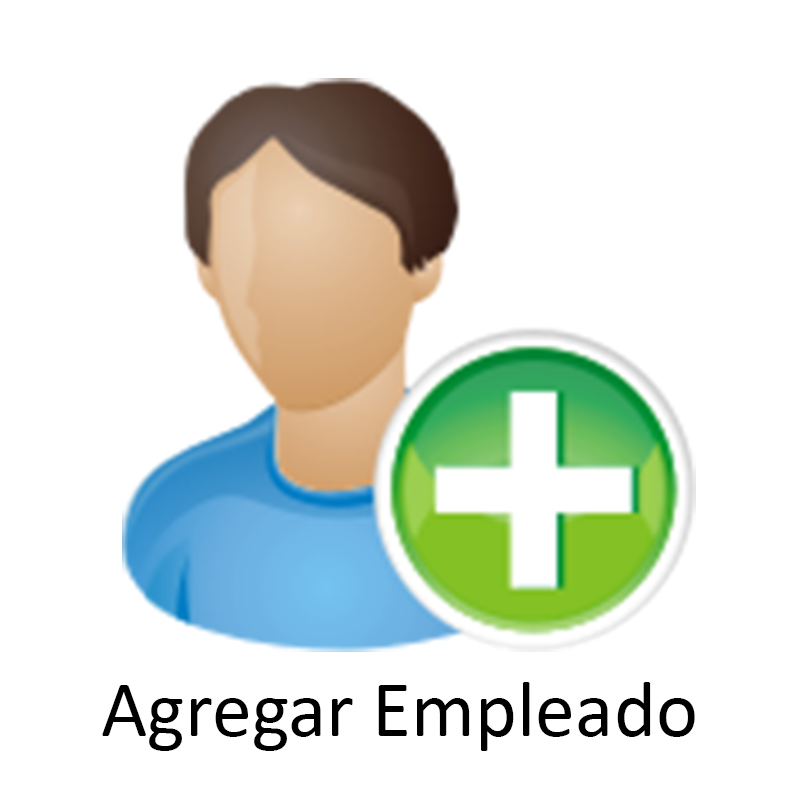
<style>
.page{position:relative;width:800px;height:800px;background:#ffffff}
.page>*{position:absolute;margin:0}
.t1{font:80px "Calibri";color:#000000}
</style>
<div class="page">
<p class="t1" style="left:102px;top:682px;width:593px;height:69px">Agregar Empleado</p>
</div>
